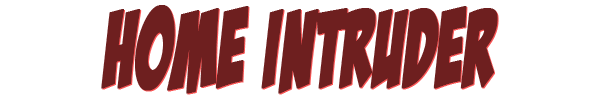
<style>
.page{position:relative;width:600px;height:100px;background:#ffffff}
.page>*{position:absolute;margin:0}
.t1{font:108px "BadaBoomBB";letter-spacing:0.01em;color:#6e1f1f;font-weight:bold;scale:0.64 1}
</style>
<div class="page">
<p class="t1" style="left:101px;top:5px;width:397px;height:89px">Home Intruder</p>
<p class="t1" style="left:102px;top:6px;width:397px;height:89px">Home Intruder</p>
</div>
